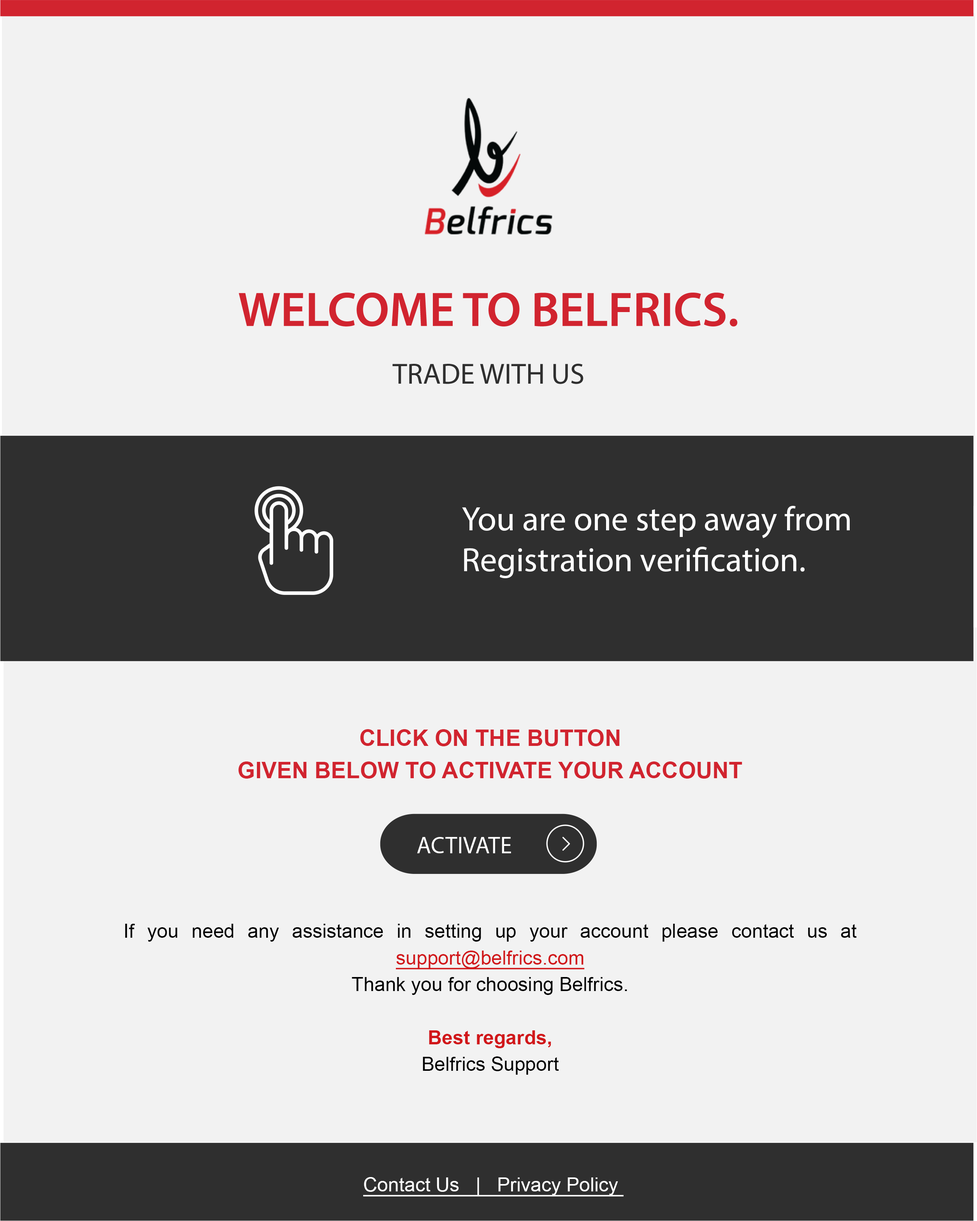
<style>
.page{position:relative;width:977px;height:1221px;background:#f2f2f2}
.page>*{position:absolute;margin:0}
.t1{font:34px "MyriadPro-Regular";color:#ffffff}
.t2{font:19.5px/26.6px "ArialMT";color:#000000}
.t3{font:22.7px/19.5px "Arial-BoldMT";color:#d1242f;text-transform:uppercase}
.t4{font:22.7px/32.4px "Arial-BoldMT";color:#d1242f;text-transform:uppercase}
.t5{font:19.5px/26.6px "ArialMT";color:#d1171a;text-decoration:underline}
.t6{font:19.5px/26.6px "Arial-BoldMT";color:#d1171a}
.t7{font:23.7px "Graphik-Regular";letter-spacing:0.01em;color:#ffffff}
.t8{font:19.5px "ArialMT";color:#ffffff;text-decoration:underline}
</style>
<div class="page">
<p class="t1" style="left:462px;top:506px;width:387px;height:72px">You are one step away from <br>Registration verification.</p>
<p class="t2" style="left:125px;top:729px;width:731px;height:346px;text-align:justify"><span class="t3">click on the button <br></span><span class="t4">given below to activate your account<br><br><br><br><br><br></span>If you need any assistance in setting up your account please contact us at <span class="t5">support@belfrics.com<br></span>Thank you for choosing Belfrics.<br><span class="t6"><br>Best regards,<br></span>Belfrics Support</p>
<p class="t7" style="left:417px;top:837px;width:94px;height:16px">ACTIVATE</p>
<p class="t8" style="left:363px;top:1177px;width:260px;height:19px">Contact Us   |   Privacy Policy</p>
</div>
